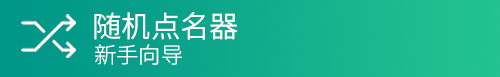
<style>
.page{position:relative;width:500px;height:77px}
.page>*{position:absolute;margin:0}
.t1{font:29.3px "NotoSansCJKsc-DemiLight";color:#ffffff}
.t2{font:22.2px "NotoSansCJKsc-Light";color:#ffffff}
</style>
<div class="page">
<p class="t1" style="left:94px;top:12px;width:144px;height:28px">随机点名器</p>
<p class="t2" style="left:95px;top:44px;width:87px;height:21px">新手向导</p>
</div>
